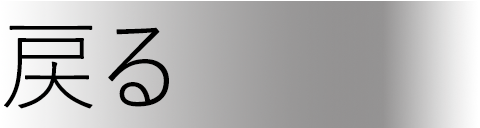
<style>
.page{position:relative;width:480px;height:128px}
.page>*{position:absolute;margin:0}
.t1{font:98px "YuGothicUI-Light";color:#000000;font-weight:bold}
</style>
<div class="page">
<p class="t1" style="left:4px;top:25px;width:165px;height:84px">戻る</p>
</div>
